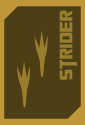
<style>
.page{position:relative;width:85px;height:125px;background:#4c3f17}
.page>*{position:absolute;margin:0}
.t1{font:20px "TransformersMovie";letter-spacing:0.04em;color:#997e2e}
.t2{font:20px "TransformersMovie";letter-spacing:0.02em;color:#997e2e}
.t3{font:20px "TransformersMovie";letter-spacing:0.06em;color:#997e2e}
</style>
<div class="page">
<p class="t1" style="left:59px;top:10px;width:19px;height:70px;rotate:-90deg">st<span class="t2">r</span><span class="t3">i</span><span class="t2">d</span>er</p>
</div>
